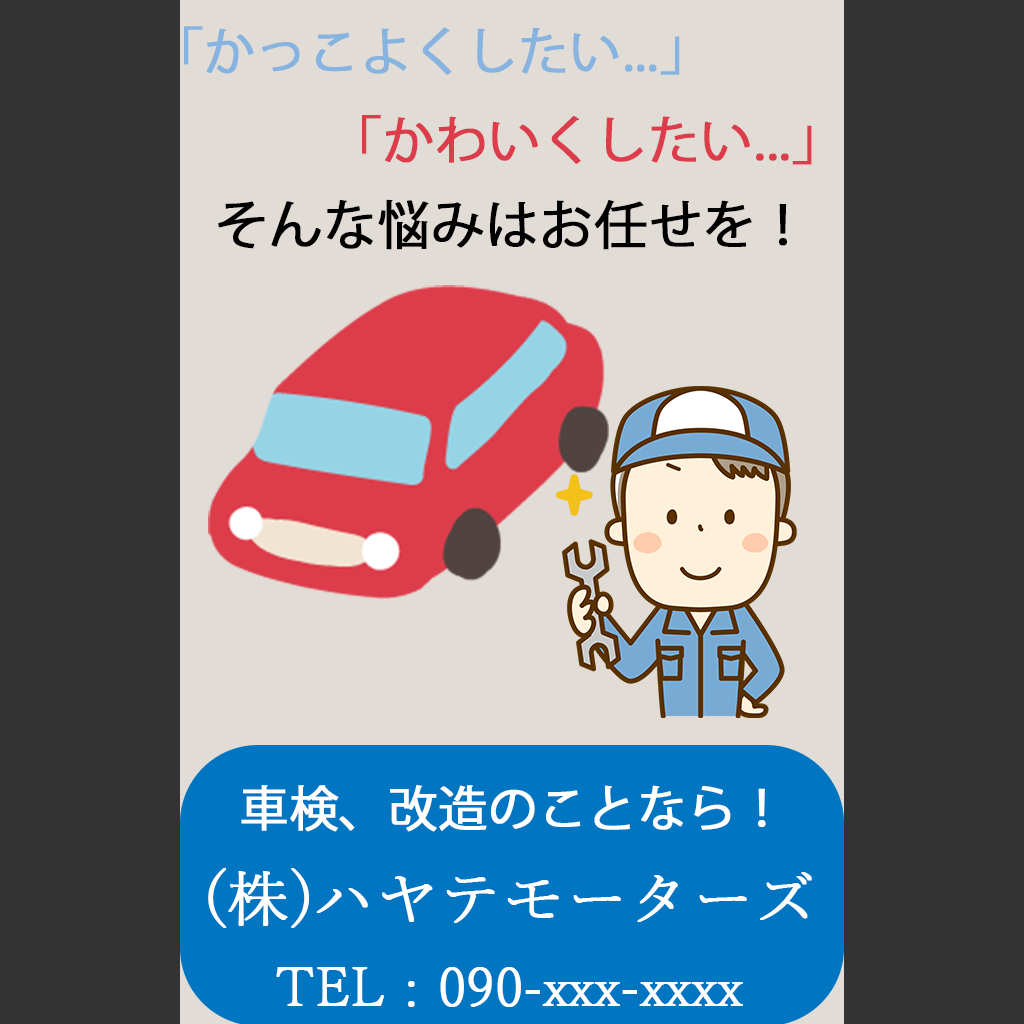
<style>
.page{position:relative;width:1024px;height:1024px;background:#333333}
.page>*{position:absolute;margin:0}
.t1{font:50.9px "KozGoPr6N-Regular";color:#86b3e0;font-weight:bold}
.t2{font:51.6px "KozGoPr6N-Regular";color:#dd3d4b;font-weight:bold}
.t3{font:52.7px "KozGoPr6N-Regular";color:#000000;font-weight:bold}
.t4{font:48.5px "KozGoPr6N-Regular";color:#ffffff;font-weight:bold}
.t5{font:61.3px "YuMincho-Light";color:#ffffff;font-weight:bold}
.t6{font:53.7px "YuMincho-Light";color:#ffffff;font-weight:bold}
</style>
<div class="page">
<p class="t1" style="left:184px;top:26px;width:496px;height:49px">「かっこよくしたい...」</p>
<p class="t2" style="left:362px;top:115px;width:450px;height:50px">「かわいくしたい...」</p>
<p class="t3" style="left:218px;top:199px;width:569px;height:51px">そんな悩みはお任せを！</p>
<p class="t4" style="left:241px;top:785px;width:525px;height:47px">車検、改造のことなら！</p>
<p class="t5" style="left:208px;top:868px;width:604px;height:60px">(株)ハヤテモーターズ</p>
<p class="t6" style="left:276px;top:967px;width:467px;height:40px">TEL : 090-xxx-xxxx</p>
</div>
